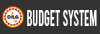
<style>
.page{position:relative;width:100px;height:34px;background:#333333}
.page>*{position:absolute;margin:0}
.t1{font:23px "Bebas-Regular";color:#ffffff;text-transform:uppercase;scale:0.58 1}
</style>
<div class="page">
<p class="t1" style="left:27px;top:10px;width:70px;height:16px">BUDGET SYSTEM</p>
</div>
